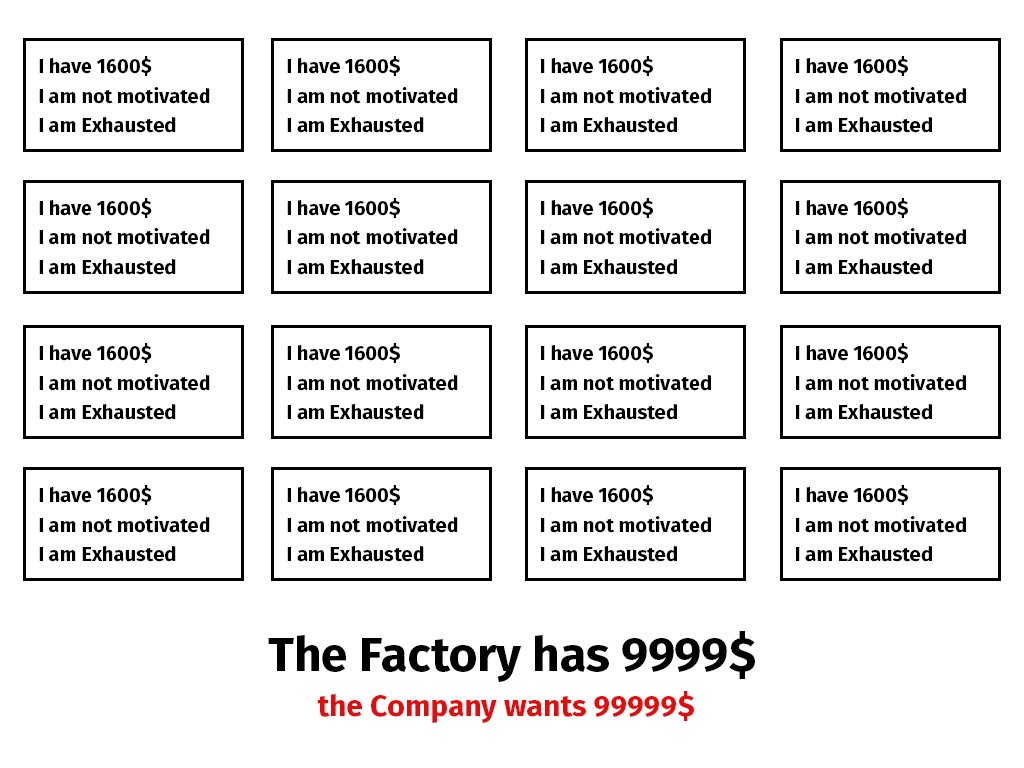
<style>
.page{position:relative;width:1024px;height:768px;background:#ffffff}
.page>*{position:absolute;margin:0}
.t1{font:20px/29.3px "FiraSansOT-Bold";color:#000000}
.t2{font:30px/45px "FiraSansOT-Bold";color:#e60a0a}
.t3{font:48px/45px "FiraSansOT-Bold";color:#000000}
</style>
<div class="page">
<p class="t1" style="left:39px;top:56px;width:171px;height:77px">I have 1600$<br>I am not motivated<br>I am Exhausted</p>
<p class="t1" style="left:287px;top:56px;width:171px;height:77px">I have 1600$<br>I am not motivated<br>I am Exhausted</p>
<p class="t1" style="left:541px;top:56px;width:170px;height:77px">I have 1600$<br>I am not motivated<br>I am Exhausted</p>
<p class="t1" style="left:796px;top:56px;width:170px;height:77px">I have 1600$<br>I am not motivated<br>I am Exhausted</p>
<p class="t1" style="left:39px;top:198px;width:171px;height:77px">I have 1600$<br>I am not motivated<br>I am Exhausted</p>
<p class="t1" style="left:287px;top:198px;width:171px;height:77px">I have 1600$<br>I am not motivated<br>I am Exhausted</p>
<p class="t1" style="left:541px;top:198px;width:170px;height:77px">I have 1600$<br>I am not motivated<br>I am Exhausted</p>
<p class="t1" style="left:796px;top:198px;width:170px;height:77px">I have 1600$<br>I am not motivated<br>I am Exhausted</p>
<p class="t1" style="left:39px;top:343px;width:171px;height:77px">I have 1600$<br>I am not motivated<br>I am Exhausted</p>
<p class="t1" style="left:287px;top:343px;width:171px;height:77px">I have 1600$<br>I am not motivated<br>I am Exhausted</p>
<p class="t1" style="left:541px;top:343px;width:170px;height:77px">I have 1600$<br>I am not motivated<br>I am Exhausted</p>
<p class="t1" style="left:796px;top:343px;width:170px;height:77px">I have 1600$<br>I am not motivated<br>I am Exhausted</p>
<p class="t1" style="left:39px;top:485px;width:171px;height:77px">I have 1600$<br>I am not motivated<br>I am Exhausted</p>
<p class="t1" style="left:287px;top:485px;width:171px;height:77px">I have 1600$<br>I am not motivated<br>I am Exhausted</p>
<p class="t1" style="left:541px;top:485px;width:170px;height:77px">I have 1600$<br>I am not motivated<br>I am Exhausted</p>
<p class="t1" style="left:796px;top:485px;width:170px;height:77px">I have 1600$<br>I am not motivated<br>I am Exhausted</p>
<p class="t2" style="left:268px;top:631px;width:487px;height:92px;text-align:center"><span class="t3">The Factory has 9999$<br></span>the Company wants 99999$</p>
</div>
